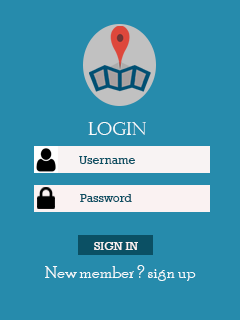
<style>
.page{position:relative;width:240px;height:320px;background:#268bac}
.page>*{position:absolute;margin:0}
.t1{font:18px "PerpetuaTitlingMT-Light";color:#f7fbfc}
.t2{font:12px "Rockwell";color:#0b5064}
.t3{font:12px "Rockwell";color:#f7fbfc}
.t4{font:18px "PoorRichard-Regular";color:#f7fbfc}
</style>
<div class="page">
<p class="t1" style="left:88px;top:122px;width:58px;height:13px">login</p>
<p class="t2" style="left:79px;top:156px;width:56px;height:8px">Username</p>
<p class="t2" style="left:80px;top:194px;width:52px;height:8px">Password</p>
<p class="t3" style="left:94px;top:242px;width:44px;height:8px">SIGN IN</p>
<p class="t4" style="left:45px;top:265px;width:151px;height:16px">New member ? sign up</p>
</div>
